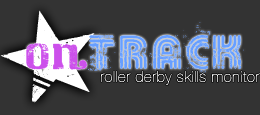
<style>
.page{position:relative;width:260px;height:115px;background:#333333}
.page>*{position:absolute;margin:0}
.t1{font:50px "KILLEDDJ";letter-spacing:0.04em;color:#689fff}
.t2{font:50px "ChicagoHouse";letter-spacing:0.04em;color:#cc50eb}
.t3{font:15px "HelveticaNeue-UltraLight";letter-spacing:0.04em;color:#ffffff}
</style>
<div class="page">
<p class="t1" style="left:26px;top:22px;width:218px;height:52px"><span class="t2">on</span>track</p>
<p class="t1" style="left:26px;top:22px;width:218px;height:52px"><span class="t2">on</span>track</p>
<p class="t3" style="left:101px;top:71px;width:159px;height:14px">roller derby skills monitor</p>
</div>
